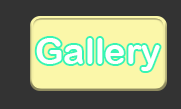
<style>
.page{position:relative;width:181px;height:109px;background:#333333}
.page>*{position:absolute;margin:0}
.t1{font:36px "ArialRoundedMTBold";color:#ffffff}
</style>
<div class="page">
<p class="t1" style="left:36px;top:38px;width:124px;height:33px">Gallery</p>
</div>
